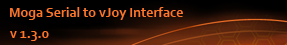
<style>
.page{position:relative;width:287px;height:45px}
.page>*{position:absolute;margin:0}
.t1{font:14px "Corbel-Bold";color:#fe762a}
</style>
<div class="page">
<p class="t1" style="left:10px;top:7px;width:173px;height:13px">Moga Serial to vJoy Interface</p>
<p class="t1" style="left:10px;top:31px;width:39px;height:10px">v 1.3.0</p>
</div>
